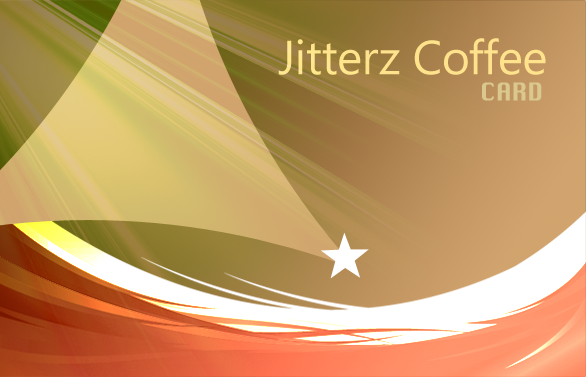
<style>
.page{position:relative;width:586px;height:377px}
.page>*{position:absolute;margin:0}
.t1{font:48px "SegoeUI";letter-spacing:-0.01em;color:#ffe28b}
</style>
<div class="page">
<p class="t1" style="left:278px;top:38px;width:268px;height:37px">Jitterz Coffee</p>
</div>
